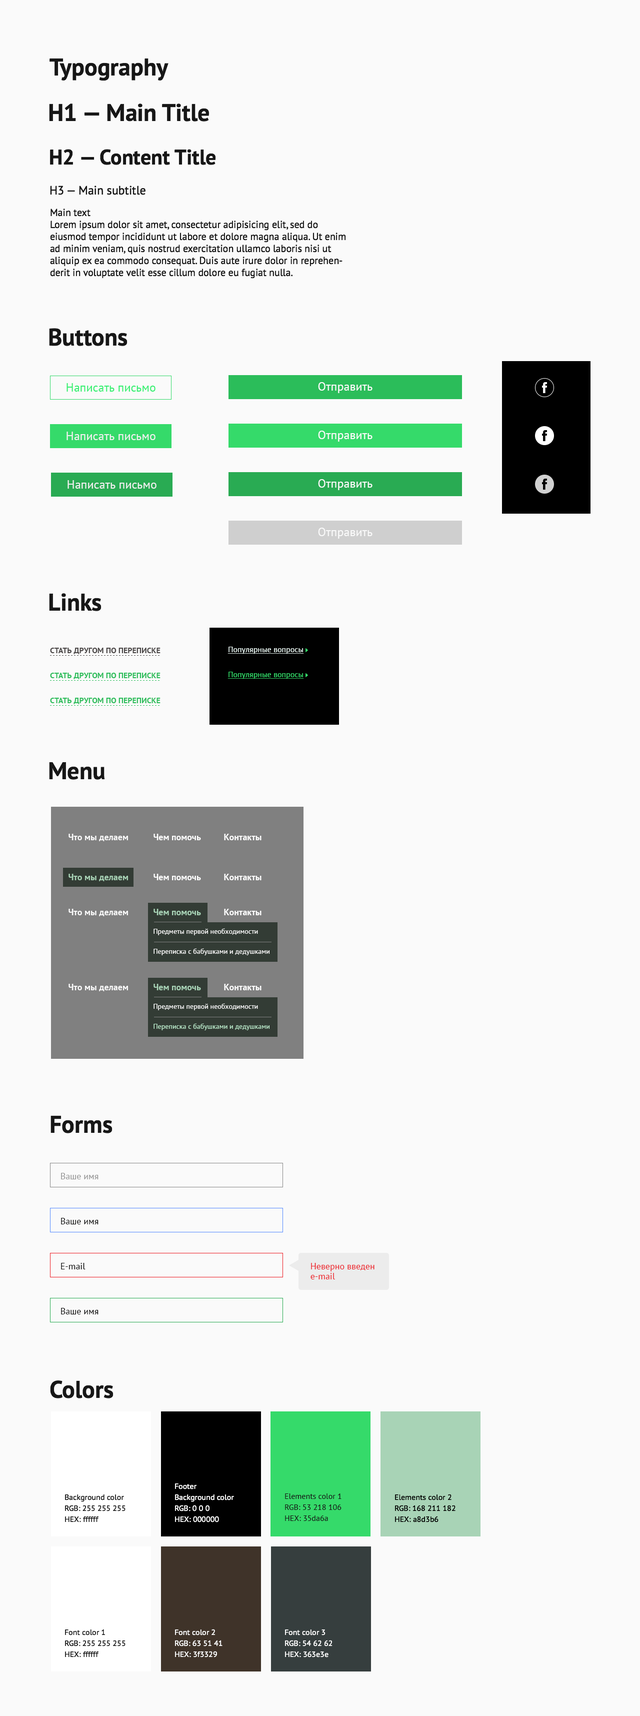
<style>
.page{position:relative;width:640px;height:1716px;background:#fafafa}
.page>*{position:absolute;margin:0}
.t1{font:24px "PTSans-Bold";color:#171717}
.t2{font:21px "PTSans-Bold";color:#171717}
.t3{font:12px "PTSans-Regular";color:#171717}
.t4{font:10px/12px "PTSans-Regular";color:#171717}
.t5{font:12px "PTSans-Regular";color:#33f070}
.t6{font:12px "PTSans-Regular";color:#fafafa}
.t7{font:12px "PTSans-Regular";color:#f0f0f0}
.t8{font:8px "PTSans-Bold";color:#4a4646;text-transform:uppercase}
.t9{font:8px "PTSans-Regular";color:#ecfaf6;text-decoration:underline}
.t10{font:8px "PTSans-Bold";color:#2bbd5a;text-transform:uppercase}
.t11{font:8px "PTSans-Regular";color:#35da6a;text-decoration:underline}
.t12{font:9px "PTSans-Bold";color:#fafafa}
.t13{font:9px "PTSans-Bold";color:#ffffff}
.t14{font:9px "PTSans-Bold";color:#a8d3b6}
.t15{font:7px "PTSans-Regular";color:#ffffff}
.t16{font:7px "PTSans-Regular";color:#bceccc}
.t17{font:9px "PTSans-Regular";color:#949494}
.t18{font:9px "PTSans-Regular";color:#010101}
.t19{font:9px "PTSans-Regular";color:#000000}
.t20{font:9px/10px "PTSans-Regular";color:#ed1c24}
.t21{font:8px/11px "PTSans-Regular";color:#171717}
.t22{font:8px/11px "PTSans-Regular";color:#ffffff}
.t23{font:8px/11px "PTSans-Regular";color:#000000}
</style>
<div class="page">
<p class="t1" style="left:50px;top:58px;width:118px;height:23px">Typography</p>
<p class="t1" style="left:49px;top:104px;width:161px;height:18px">H1 — Main Title</p>
<p class="t2" style="left:50px;top:149px;width:166px;height:16px">H2 — Content Title</p>
<p class="t3" style="left:50px;top:186px;width:96px;height:9px">H3 — Main subtitle</p>
<p class="t4" style="left:50px;top:208px;width:296px;height:70px">Main text<br>Lorem ipsum dolor sit amet, consectetur adipisicing elit, sed do eiusmod tempor incididunt ut labore et dolore magna aliqua. Ut enim ad minim veniam, quis nostrud exercitation ullamco laboris nisi ut aliquip ex ea commodo consequat. Duis aute irure dolor in reprehenderit in voluptate velit esse cillum dolore eu fugiat nulla.</p>
<p class="t1" style="left:49px;top:328px;width:79px;height:18px">Buttons</p>
<p class="t5" style="left:66px;top:383px;width:90px;height:9px">Написать письмо</p>
<p class="t6" style="left:318px;top:382px;width:54px;height:11px">Отправить</p>
<p class="t7" style="left:66px;top:432px;width:90px;height:8px">Написать письмо</p>
<p class="t6" style="left:318px;top:430px;width:54px;height:12px">Отправить</p>
<p class="t7" style="left:68px;top:480px;width:88px;height:8px">Написать письмо</p>
<p class="t6" style="left:318px;top:479px;width:54px;height:11px">Отправить</p>
<p class="t6" style="left:318px;top:528px;width:54px;height:10px">Отправить</p>
<p class="t1" style="left:49px;top:593px;width:53px;height:18px">Links</p>
<p class="t8" style="left:50px;top:648px;width:110px;height:6px">Стать другом по переписке</p>
<p class="t9" style="left:228px;top:646px;width:76px;height:8px">Популярные вопросы</p>
<p class="t10" style="left:50px;top:672px;width:110px;height:7px">Стать другом по переписке</p>
<p class="t11" style="left:228px;top:672px;width:76px;height:6px">Популярные вопросы</p>
<p class="t10" style="left:50px;top:698px;width:110px;height:6px">Стать другом по переписке</p>
<p class="t1" style="left:49px;top:762px;width:56px;height:18px">Menu</p>
<p class="t12" style="left:68px;top:834px;width:60px;height:7px">Что мы делаем</p>
<p class="t13" style="left:154px;top:834px;width:47px;height:6px">Чем помочь</p>
<p class="t13" style="left:224px;top:834px;width:38px;height:6px">Контакты</p>
<p class="t14" style="left:68px;top:874px;width:60px;height:7px">Что мы делаем</p>
<p class="t13" style="left:154px;top:874px;width:47px;height:6px">Чем помочь</p>
<p class="t13" style="left:224px;top:874px;width:38px;height:6px">Контакты</p>
<p class="t12" style="left:68px;top:908px;width:60px;height:8px">Что мы делаем</p>
<p class="t14" style="left:154px;top:908px;width:47px;height:7px">Чем помочь</p>
<p class="t13" style="left:224px;top:908px;width:38px;height:7px">Контакты</p>
<p class="t15" style="left:154px;top:928px;width:104px;height:7px">Предметы первой необходимости</p>
<p class="t15" style="left:154px;top:948px;width:116px;height:7px">Переписка с бабушками и дедушками</p>
<p class="t12" style="left:68px;top:984px;width:60px;height:7px">Что мы делаем</p>
<p class="t14" style="left:154px;top:984px;width:47px;height:6px">Чем помочь</p>
<p class="t13" style="left:224px;top:984px;width:38px;height:6px">Контакты</p>
<p class="t15" style="left:154px;top:1003px;width:104px;height:7px">Предметы первой необходимости</p>
<p class="t16" style="left:154px;top:1023px;width:116px;height:7px">Переписка с бабушками и дедушками</p>
<p class="t1" style="left:50px;top:1115px;width:62px;height:18px">Forms</p>
<p class="t17" style="left:61px;top:1172px;width:37px;height:7px">Ваше имя</p>
<p class="t18" style="left:61px;top:1218px;width:37px;height:6px">Ваше имя</p>
<p class="t19" style="left:61px;top:1262px;width:25px;height:7px">E-mail</p>
<p class="t20" style="left:310px;top:1262px;width:64px;height:17px">Неверно введен <br>e-mail</p>
<p class="t18" style="left:61px;top:1308px;width:37px;height:6px">Ваше имя</p>
<p class="t1" style="left:50px;top:1380px;width:64px;height:18px">Colors</p>
<p class="t21" style="left:65px;top:1494px;width:61px;height:28px">Background color<br>RGB: 255 255 255<br>HEX: ffffff</p>
<p class="t22" style="left:175px;top:1483px;width:59px;height:39px">Footer<br>Background color<br>RGB: 0 0 0<br>HEX: 000000</p>
<p class="t21" style="left:285px;top:1493px;width:57px;height:27px">Elements color 1<br>RGB: 53 218 106<br>HEX: 35da6a</p>
<p class="t23" style="left:395px;top:1494px;width:61px;height:28px">Elements color 2<br>RGB: 168 211 182<br>HEX: a8d3b6</p>
<p class="t21" style="left:65px;top:1628px;width:61px;height:29px">Font color 1<br>RGB: 255 255 255<br>HEX: ffffff</p>
<p class="t22" style="left:175px;top:1628px;width:47px;height:29px">Font color 2<br>RGB: 63 51 41<br>HEX: 3f3329</p>
<p class="t22" style="left:285px;top:1629px;width:47px;height:28px">Font color 3<br>RGB: 54 62 62<br>HEX: 363e3e</p>
</div>
